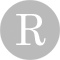
<style>
.page{position:relative;width:60px;height:60px;background:#bababa}
.page>*{position:absolute;margin:0}
.t1{font:43px "Century";color:#ffffff}
</style>
<div class="page">
<p class="t1" style="left:16px;top:14px;width:30px;height:32px">R</p>
</div>
